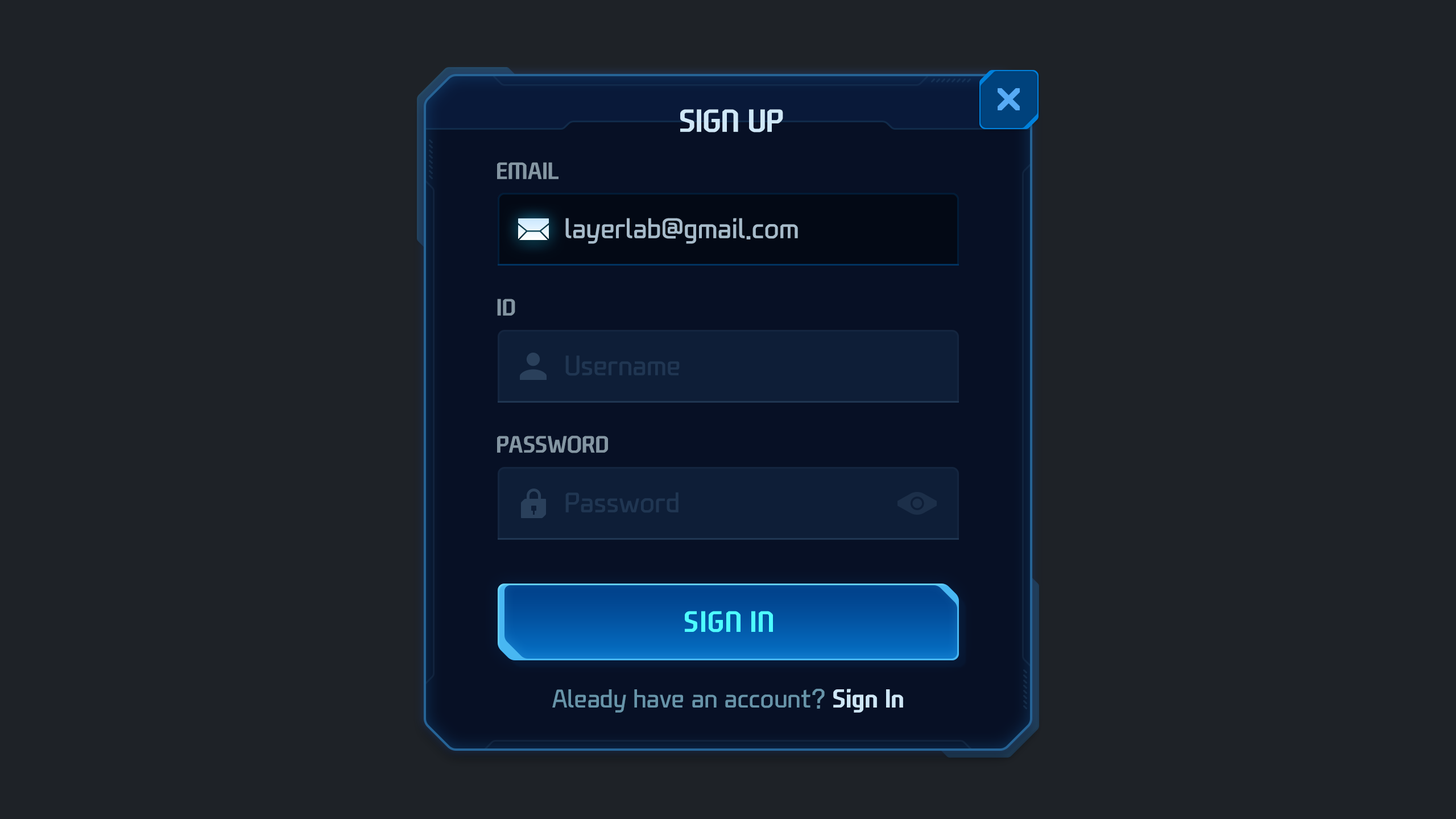
<style>
.page{position:relative;width:1456px;height:819px;background:#1e2227}
.page>*{position:absolute;margin:0}
.t1{font:30.7px "NEXONFootballGothicB";color:#cfe7f7;text-transform:uppercase}
.t2{font:22.7px "NEXONFootballGothicB";color:#8496a3;text-transform:uppercase}
.t3{font:27.3px "NEXONFootballGothicL";color:#a7bbca}
.t4{font:27.3px "NEXONFootballGothicL";color:#203652}
.t5{font:28.4px "NEXONFootballGothicB";color:#4efefe;text-transform:uppercase}
.t6{font:25px "NEXONFootballGothicL";color:#6794a9}
.t7{font:25px "NEXONFootballGothicB";color:#cfe7f7}
</style>
<div class="page">
<p class="t1" style="left:680px;top:109px;width:103px;height:24px">Sign Up</p>
<p class="t2" style="left:497px;top:162px;width:62px;height:17px">Email</p>
<p class="t3" style="left:565px;top:218px;width:233px;height:26px">layerlab@gmail.com</p>
<p class="t2" style="left:497px;top:299px;width:18px;height:17px">Id</p>
<p class="t4" style="left:565px;top:355px;width:115px;height:21px">Username</p>
<p class="t2" style="left:497px;top:436px;width:111px;height:17px">Password</p>
<p class="t4" style="left:565px;top:492px;width:114px;height:21px">Password</p>
<p class="t5" style="left:685px;top:611px;width:88px;height:21px">Sign in</p>
<p class="t6" style="left:552px;top:689px;width:351px;height:24px">Aleady have an account? <span class="t7">Sign In</span></p>
</div>
